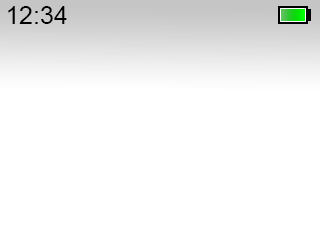
<style>
.page{position:relative;width:320px;height:240px;background:#ffffff}
.page>*{position:absolute;margin:0}
.t1{font:25px "ArialMT";color:#000000}
</style>
<div class="page">
<p class="t1" style="left:8px;top:6px;width:59px;height:18px">12:34</p>
</div>
